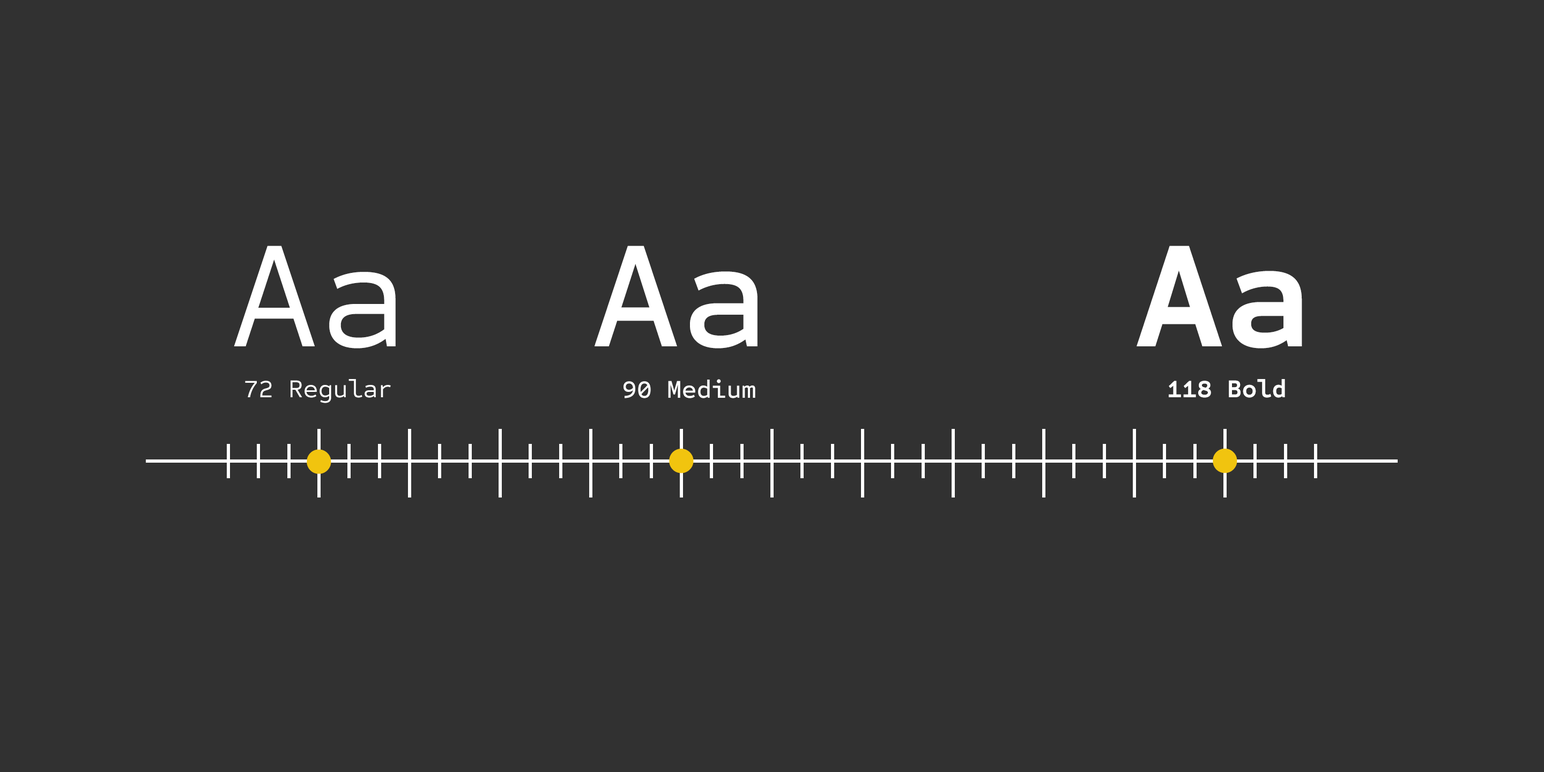
<style>
.page{position:relative;width:1544px;height:772px;background:#313131}
.page>*{position:absolute;margin:0}
.t1{font:154.4px "SometypeMono-Regular";color:#ffffff}
.t2{font:154.4px "SometypeMono-Medium";color:#ffffff}
.t3{font:154.4px "SometypeMono-Bold";color:#ffffff}
.t4{font:25.7px "SometypeMono-Regular";color:#ffffff}
.t5{font:25.7px "SometypeMono-Medium";color:#ffffff}
.t6{font:25.7px "SometypeMono-Bold";color:#ffffff}
.t7{font:160.9px "SometypeMono-Regular";color:#f1c40f}
</style>
<div class="page">
<p class="t1" style="left:234px;top:246px;width:162px;height:103px">Aa</p>
<p class="t2" style="left:595px;top:246px;width:163px;height:103px">Aa</p>
<p class="t3" style="left:1137px;top:246px;width:165px;height:103px">Aa</p>
<p class="t4" style="left:245px;top:379px;width:146px;height:24px">72 Regular</p>
<p class="t5" style="left:624px;top:379px;width:132px;height:19px">90 Medium</p>
<p class="t6" style="left:1169px;top:379px;width:116px;height:19px">118 Bold</p>
<p class="t7" style="left:307px;top:449px;width:24px;height:25px;rotate:90deg">.</p>
<p class="t7" style="left:669px;top:449px;width:25px;height:24px;rotate:90deg">.</p>
<p class="t7" style="left:1213px;top:448px;width:25px;height:25px;rotate:90deg">.</p>
</div>
